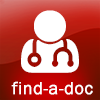
<style>
.page{position:relative;width:100px;height:100px;background:#ffffff}
.page>*{position:absolute;margin:0}
.t1{font:18px "FranklinGothic-Book";letter-spacing:0.01em;color:#ffffff;font-weight:bold}
</style>
<div class="page">
<p class="t1" style="left:11px;top:81px;width:82px;height:14px">find-a-doc</p>
</div>
